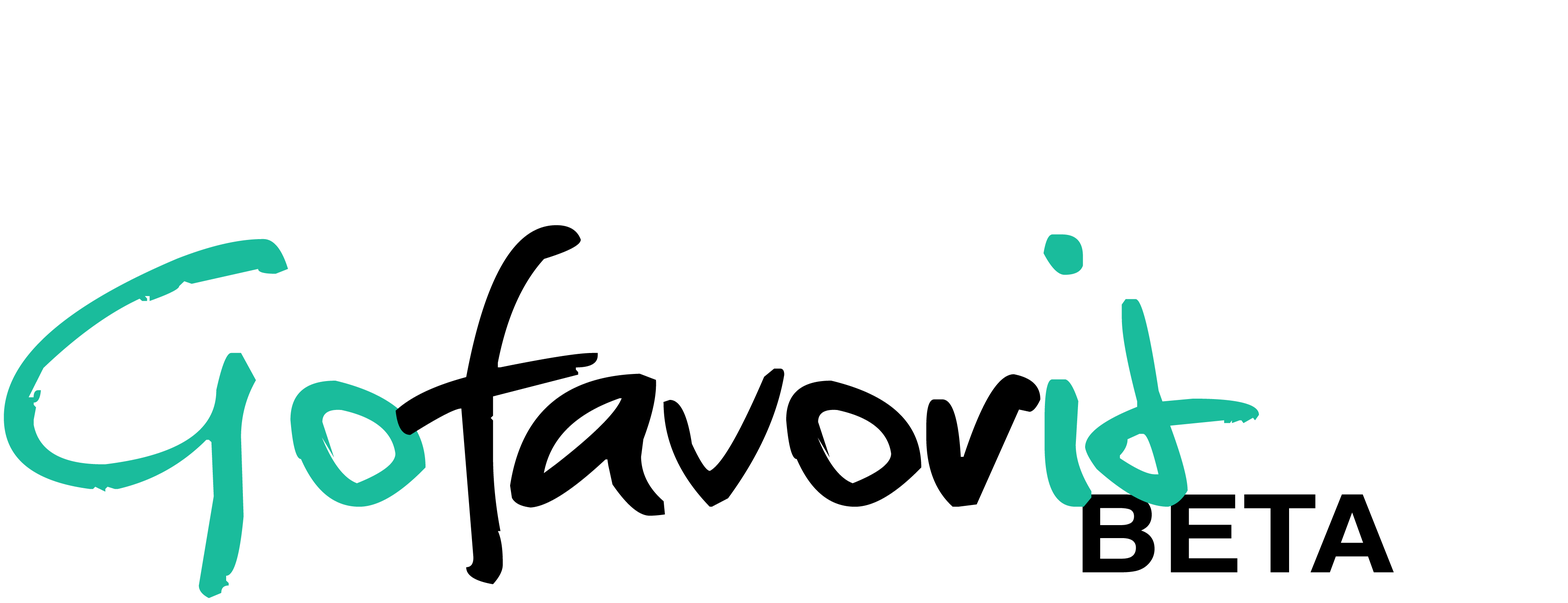
<style>
.page{position:relative;width:1568px;height:603px;background:#ffffff}
.page>*{position:absolute;margin:0}
.t1{font:525.5px "Christopherhand";color:#000000}
.t2{font:525.5px "Christopherhand";color:#1abc9c}
.t3{font:108px "Helvetica-Bold";color:#000000;scale:1.13 1}
</style>
<div class="page">
<p class="t1" style="left:4px;top:225px;width:1255px;height:373px"><span class="t2">Go</span>favor<span class="t2">it</span></p>
<p class="t3" style="left:1083px;top:494px;width:311px;height:79px">BETA</p>
</div>
